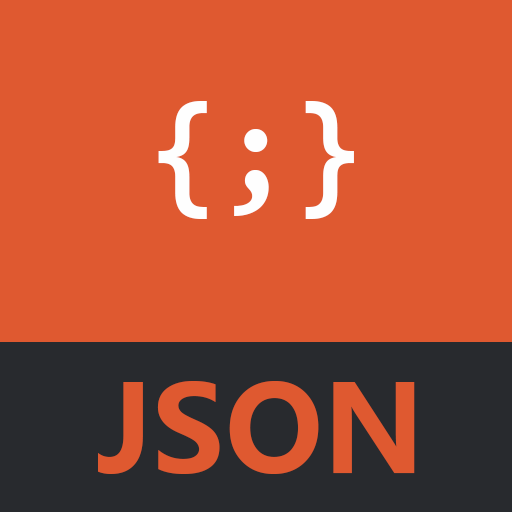
<style>
.page{position:relative;width:512px;height:512px;background:#df5930}
.page>*{position:absolute;margin:0}
.t1{font:130px "Consolas-Bold";color:#fefefe}
.t2{font:120px "MicrosoftYaHei-Bold";color:#df5930}
</style>
<div class="page">
<p class="t1" style="left:158px;top:101px;width:196px;height:118px">{;}</p>
<p class="t2" style="left:98px;top:381px;width:317px;height:93px">JSON</p>
</div>
